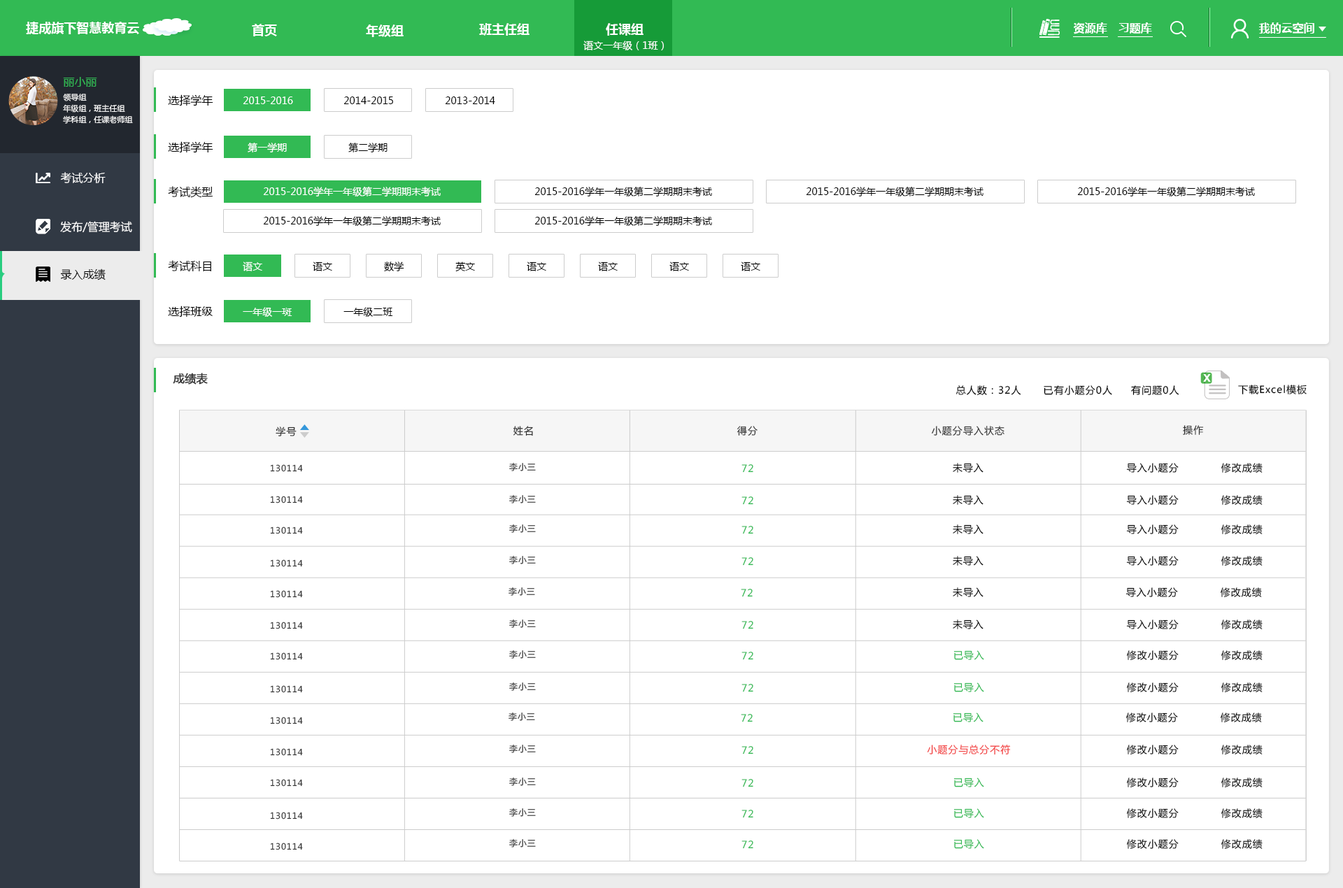
<style>
.page{position:relative;width:1343px;height:888px;background:#ffffff}
.page>*{position:absolute;margin:0}
.t1{font:12.6px "MicrosoftYaHei-Bold";color:#ffffff}
.t2{font:11.2px "MicrosoftYaHei-Bold";color:#ffffff}
.t3{font:9.8px "MicrosoftYaHei";color:#ffffff}
.t4{font:11.2px "MicrosoftYaHei";color:#32ba54}
.t5{font:7.7px/11.2px "MicrosoftYaHei";color:#ffffff}
.t6{font:11.2px "MicrosoftYaHei";color:#000000}
.t7{font:9.8px "MicrosoftYaHei";color:#000000}
.t8{font:11.2px "MicrosoftYaHei";color:#ffffff}
.t9{font:11.2px "MicrosoftYaHei";color:#333333;font-weight:bold}
.t10{font:9.8px "MicrosoftYaHei";letter-spacing:0.075em;color:#000000}
.t11{font:9.8px "MicrosoftYaHei";letter-spacing:0.075em;color:#333333}
.t12{font:8.4px "MicrosoftYaHei";letter-spacing:0.075em;color:#333333}
.t13{font:8.4px "MicrosoftYaHei";letter-spacing:0.075em}
.t14{font:9.8px "MicrosoftYaHei";letter-spacing:0.075em;color:#32ba54}
.t15{font:9.8px "MicrosoftYaHei";letter-spacing:0.075em;color:#f34242}
</style>
<div class="page">
<p class="t1" style="left:26px;top:22px;width:113px;height:12px">捷成旗下智慧教育云</p>
<p class="t1" style="left:252px;top:24px;width:25px;height:12px">首页</p>
<p class="t1" style="left:366px;top:24px;width:37px;height:13px">年级组</p>
<p class="t1" style="left:479px;top:23px;width:50px;height:13px">班主任组</p>
<p class="t1" style="left:606px;top:23px;width:37px;height:13px">任课组</p>
<p class="t2" style="left:1073px;top:22px;width:34px;height:12px">资源库</p>
<p class="t2" style="left:1118px;top:22px;width:34px;height:12px">习题库</p>
<p class="t2" style="left:1259px;top:22px;width:55px;height:12px">我的云空间</p>
<p class="t3" style="left:583px;top:41px;width:81px;height:9px">语文一年级（1班）</p>
<p class="t4" style="left:63px;top:77px;width:34px;height:10px">丽小丽</p>
<p class="t4" style="left:63px;top:77px;width:34px;height:10px">丽小丽</p>
<p class="t5" style="left:63px;top:94px;width:70px;height:30px">领导组<br>年级组，班主任组<br>学科组，任课老师组</p>
<p class="t6" style="left:168px;top:94px;width:45px;height:12px">选择学年</p>
<p class="t3" style="left:243px;top:97px;width:50px;height:7px">2015-2016</p>
<p class="t7" style="left:343px;top:97px;width:50px;height:7px">2014-2015</p>
<p class="t7" style="left:445px;top:97px;width:50px;height:7px">2013-2014</p>
<p class="t6" style="left:168px;top:141px;width:45px;height:12px">选择学年</p>
<p class="t3" style="left:248px;top:143px;width:39px;height:9px">第一学期</p>
<p class="t7" style="left:348px;top:143px;width:39px;height:9px">第二学期</p>
<p class="t8" style="left:60px;top:172px;width:46px;height:11px">考试分析</p>
<p class="t8" style="left:60px;top:172px;width:46px;height:11px">考试分析</p>
<p class="t6" style="left:168px;top:186px;width:45px;height:12px">考试类型</p>
<p class="t3" style="left:263px;top:187px;width:178px;height:10px">2015-2016学年一年级第二学期期末考试</p>
<p class="t7" style="left:534px;top:187px;width:178px;height:10px">2015-2016学年一年级第二学期期末考试</p>
<p class="t7" style="left:806px;top:187px;width:177px;height:10px">2015-2016学年一年级第二学期期末考试</p>
<p class="t7" style="left:1077px;top:187px;width:178px;height:10px">2015-2016学年一年级第二学期期末考试</p>
<p class="t8" style="left:60px;top:221px;width:72px;height:12px">发布/管理考试</p>
<p class="t7" style="left:263px;top:216px;width:178px;height:10px">2015-2016学年一年级第二学期期末考试</p>
<p class="t7" style="left:534px;top:216px;width:178px;height:10px">2015-2016学年一年级第二学期期末考试</p>
<p class="t6" style="left:60px;top:269px;width:46px;height:11px">录入成绩</p>
<p class="t6" style="left:60px;top:269px;width:46px;height:11px">录入成绩</p>
<p class="t6" style="left:60px;top:269px;width:46px;height:11px">录入成绩</p>
<p class="t6" style="left:168px;top:260px;width:43px;height:11px">考试科目</p>
<p class="t3" style="left:243px;top:262px;width:19px;height:9px">语文</p>
<p class="t7" style="left:313px;top:262px;width:19px;height:9px">语文</p>
<p class="t7" style="left:384px;top:262px;width:20px;height:9px">数学</p>
<p class="t7" style="left:455px;top:262px;width:20px;height:10px">英文</p>
<p class="t7" style="left:527px;top:262px;width:19px;height:9px">语文</p>
<p class="t7" style="left:598px;top:262px;width:19px;height:9px">语文</p>
<p class="t7" style="left:669px;top:262px;width:20px;height:9px">语文</p>
<p class="t7" style="left:741px;top:262px;width:19px;height:9px">语文</p>
<p class="t6" style="left:168px;top:306px;width:45px;height:11px">选择班级</p>
<p class="t3" style="left:243px;top:307px;width:49px;height:10px">一年级一斑</p>
<p class="t7" style="left:343px;top:307px;width:50px;height:10px">一年级二班</p>
<p class="t9" style="left:173px;top:373px;width:35px;height:12px">成绩表</p>
<p class="t10" style="left:955px;top:385px;width:224px;height:11px">总人数：32人      已有小题分0人     有问题0人</p>
<p class="t10" style="left:1238px;top:385px;width:68px;height:9px">下载Excel模板</p>
<p class="t11" style="left:513px;top:426px;width:20px;height:10px">姓名</p>
<p class="t11" style="left:736px;top:426px;width:21px;height:10px">得分</p>
<p class="t11" style="left:931px;top:426px;width:73px;height:10px">小题分导入状态</p>
<p class="t11" style="left:1183px;top:425px;width:20px;height:10px">操作</p>
<p class="t11" style="left:276px;top:427px;width:21px;height:9px">学号</p>
<p class="t12" style="left:270px;top:464px;width:33px;height:8px">130114</p>
<p class="t13" style="left:509px;top:462px;width:27px;height:9px">李小三</p>
<p class="t14" style="left:741px;top:464px;width:12px;height:9px">72</p>
<p class="t10" style="left:952px;top:463px;width:31px;height:10px">未导入</p>
<p class="t10" style="left:1126px;top:463px;width:52px;height:10px">导入小题分</p>
<p class="t10" style="left:1220px;top:463px;width:42px;height:10px">修改成绩</p>
<p class="t12" style="left:270px;top:496px;width:33px;height:7px">130114</p>
<p class="t13" style="left:509px;top:494px;width:27px;height:9px">李小三</p>
<p class="t14" style="left:741px;top:497px;width:12px;height:8px">72</p>
<p class="t10" style="left:952px;top:495px;width:31px;height:10px">未导入</p>
<p class="t10" style="left:1126px;top:495px;width:52px;height:10px">导入小题分</p>
<p class="t10" style="left:1220px;top:495px;width:42px;height:10px">修改成绩</p>
<p class="t12" style="left:270px;top:527px;width:33px;height:7px">130114</p>
<p class="t13" style="left:509px;top:524px;width:27px;height:9px">李小三</p>
<p class="t14" style="left:741px;top:526px;width:12px;height:8px">72</p>
<p class="t10" style="left:952px;top:524px;width:31px;height:10px">未导入</p>
<p class="t10" style="left:1126px;top:524px;width:52px;height:10px">导入小题分</p>
<p class="t10" style="left:1220px;top:524px;width:42px;height:10px">修改成绩</p>
<p class="t13" style="left:509px;top:555px;width:27px;height:9px">李小三</p>
<p class="t14" style="left:741px;top:557px;width:12px;height:9px">72</p>
<p class="t10" style="left:952px;top:556px;width:31px;height:10px">未导入</p>
<p class="t10" style="left:1126px;top:556px;width:52px;height:10px">导入小题分</p>
<p class="t10" style="left:1220px;top:556px;width:42px;height:10px">修改成绩</p>
<p class="t12" style="left:270px;top:559px;width:33px;height:8px">130114</p>
<p class="t12" style="left:270px;top:590px;width:33px;height:8px">130114</p>
<p class="t13" style="left:508px;top:587px;width:27px;height:9px">李小三</p>
<p class="t14" style="left:741px;top:589px;width:11px;height:8px">72</p>
<p class="t10" style="left:952px;top:587px;width:31px;height:10px">未导入</p>
<p class="t10" style="left:1125px;top:587px;width:53px;height:10px">导入小题分</p>
<p class="t10" style="left:1220px;top:587px;width:42px;height:10px">修改成绩</p>
<p class="t12" style="left:270px;top:622px;width:33px;height:7px">130114</p>
<p class="t13" style="left:509px;top:619px;width:27px;height:9px">李小三</p>
<p class="t14" style="left:741px;top:621px;width:12px;height:8px">72</p>
<p class="t10" style="left:952px;top:620px;width:31px;height:9px">未导入</p>
<p class="t10" style="left:1126px;top:620px;width:52px;height:9px">导入小题分</p>
<p class="t10" style="left:1220px;top:620px;width:42px;height:9px">修改成绩</p>
<p class="t12" style="left:270px;top:652px;width:33px;height:8px">130114</p>
<p class="t13" style="left:509px;top:650px;width:27px;height:9px">李小三</p>
<p class="t14" style="left:741px;top:652px;width:12px;height:8px">72</p>
<p class="t14" style="left:953px;top:650px;width:31px;height:10px">已导入</p>
<p class="t10" style="left:1126px;top:650px;width:52px;height:10px">修改小题分</p>
<p class="t10" style="left:1220px;top:650px;width:42px;height:10px">修改成绩</p>
<p class="t12" style="left:270px;top:685px;width:33px;height:8px">130114</p>
<p class="t13" style="left:509px;top:682px;width:27px;height:9px">李小三</p>
<p class="t14" style="left:741px;top:684px;width:12px;height:8px">72</p>
<p class="t14" style="left:953px;top:683px;width:31px;height:9px">已导入</p>
<p class="t10" style="left:1126px;top:683px;width:52px;height:9px">修改小题分</p>
<p class="t10" style="left:1220px;top:683px;width:42px;height:9px">修改成绩</p>
<p class="t13" style="left:508px;top:712px;width:27px;height:9px">李小三</p>
<p class="t14" style="left:741px;top:714px;width:11px;height:8px">72</p>
<p class="t14" style="left:952px;top:713px;width:31px;height:9px">已导入</p>
<p class="t10" style="left:1125px;top:713px;width:53px;height:9px">修改小题分</p>
<p class="t10" style="left:1220px;top:713px;width:42px;height:9px">修改成绩</p>
<p class="t12" style="left:270px;top:717px;width:33px;height:7px">130114</p>
<p class="t12" style="left:270px;top:748px;width:33px;height:8px">130114</p>
<p class="t13" style="left:509px;top:744px;width:27px;height:9px">李小三</p>
<p class="t14" style="left:741px;top:746px;width:12px;height:9px">72</p>
<p class="t15" style="left:927px;top:745px;width:83px;height:10px">小题分与总分不符</p>
<p class="t10" style="left:1126px;top:745px;width:52px;height:10px">修改小题分</p>
<p class="t10" style="left:1220px;top:745px;width:42px;height:10px">修改成绩</p>
<p class="t12" style="left:270px;top:779px;width:33px;height:8px">130114</p>
<p class="t13" style="left:509px;top:777px;width:27px;height:9px">李小三</p>
<p class="t14" style="left:741px;top:779px;width:12px;height:8px">72</p>
<p class="t14" style="left:953px;top:778px;width:31px;height:9px">已导入</p>
<p class="t10" style="left:1126px;top:778px;width:52px;height:9px">修改小题分</p>
<p class="t10" style="left:1220px;top:778px;width:42px;height:9px">修改成绩</p>
<p class="t13" style="left:509px;top:808px;width:27px;height:9px">李小三</p>
<p class="t14" style="left:741px;top:810px;width:12px;height:8px">72</p>
<p class="t14" style="left:953px;top:808px;width:31px;height:10px">已导入</p>
<p class="t10" style="left:1126px;top:808px;width:52px;height:10px">修改小题分</p>
<p class="t10" style="left:1220px;top:808px;width:42px;height:10px">修改成绩</p>
<p class="t12" style="left:270px;top:812px;width:33px;height:8px">130114</p>
<p class="t12" style="left:270px;top:843px;width:33px;height:7px">130114</p>
<p class="t13" style="left:509px;top:838px;width:27px;height:10px">李小三</p>
<p class="t14" style="left:741px;top:841px;width:12px;height:8px">72</p>
<p class="t14" style="left:953px;top:839px;width:31px;height:10px">已导入</p>
<p class="t10" style="left:1126px;top:839px;width:52px;height:10px">修改小题分</p>
<p class="t10" style="left:1220px;top:839px;width:42px;height:10px">修改成绩</p>
</div>
